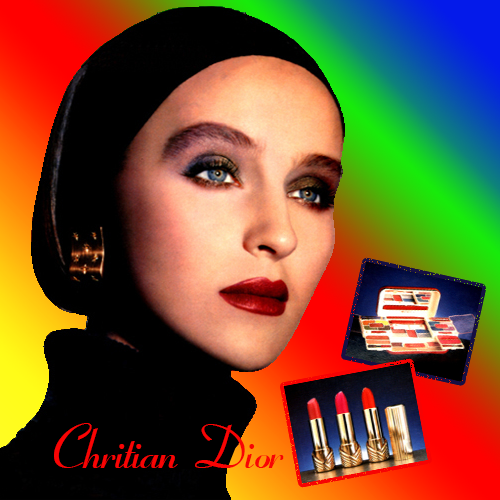
<style>
.page{position:relative;width:500px;height:500px;background:#000000}
.page>*{position:absolute;margin:0}
.t1{font:60px "VNI-Coronet-Bold-Italic";color:#f90404}
</style>
<div class="page">
<p class="t1" style="left:54px;top:423px;width:230px;height:45px">Chritian Dior</p>
</div>
